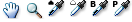
<style>
.page{position:relative;width:132px;height:22px;background:#ffffff}
.page>*{position:absolute;margin:0}
.t1{font:10px "Calibri-Bold";color:#000000}
</style>
<div class="page">
<p class="t1" style="left:90px;top:1px;width:6px;height:6px">B</p>
<p class="t1" style="left:113px;top:1px;width:5px;height:6px">P</p>
</div>
